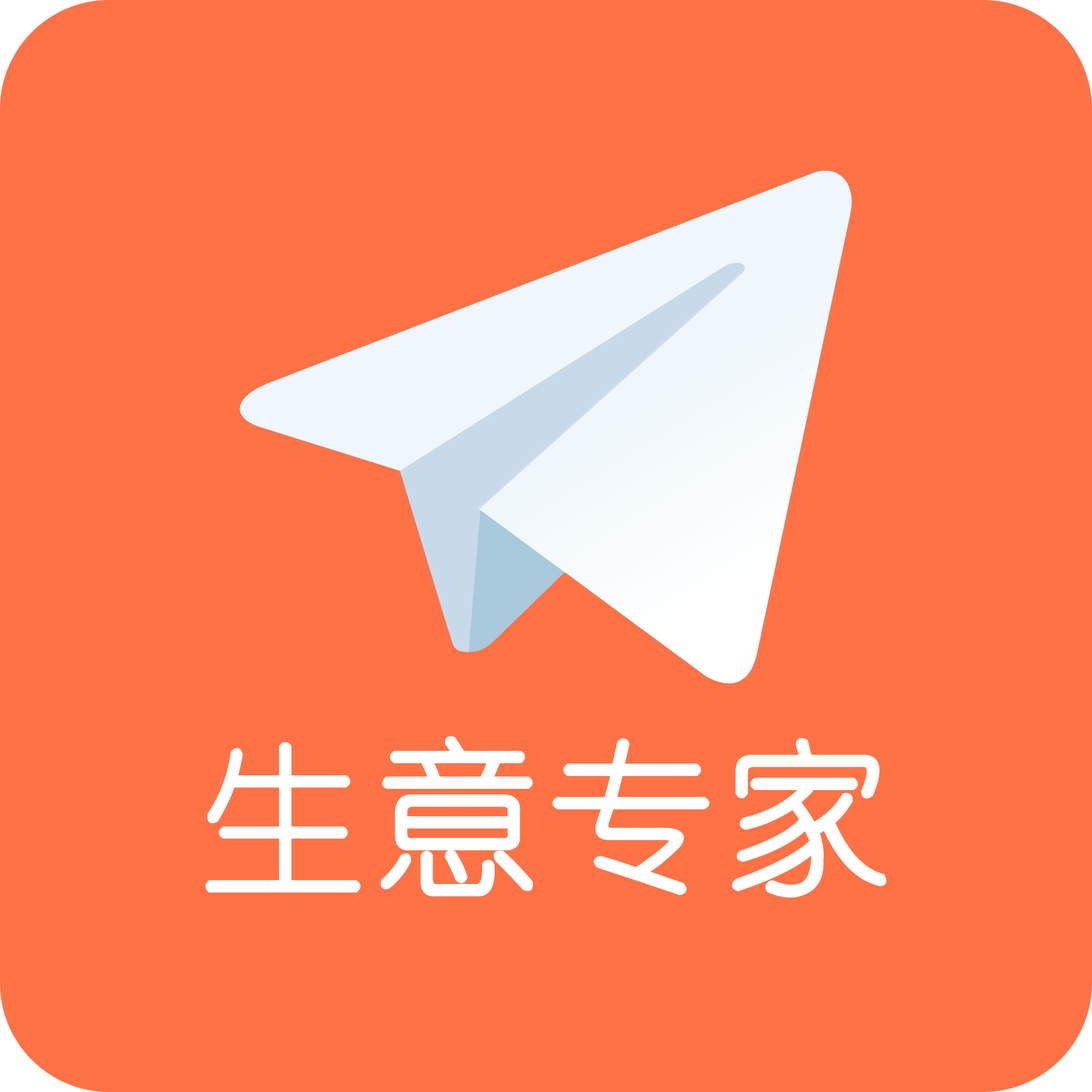
<style>
.page{position:relative;width:1092px;height:1092px;background:#ff7246}
.page>*{position:absolute;margin:0}
.t1{font:163.8px "YouYuan";letter-spacing:0.04em;color:#ffffff;font-weight:bold}
</style>
<div class="page">
<p class="t1" style="left:205px;top:736px;width:682px;height:162px">生意专家</p>
</div>
